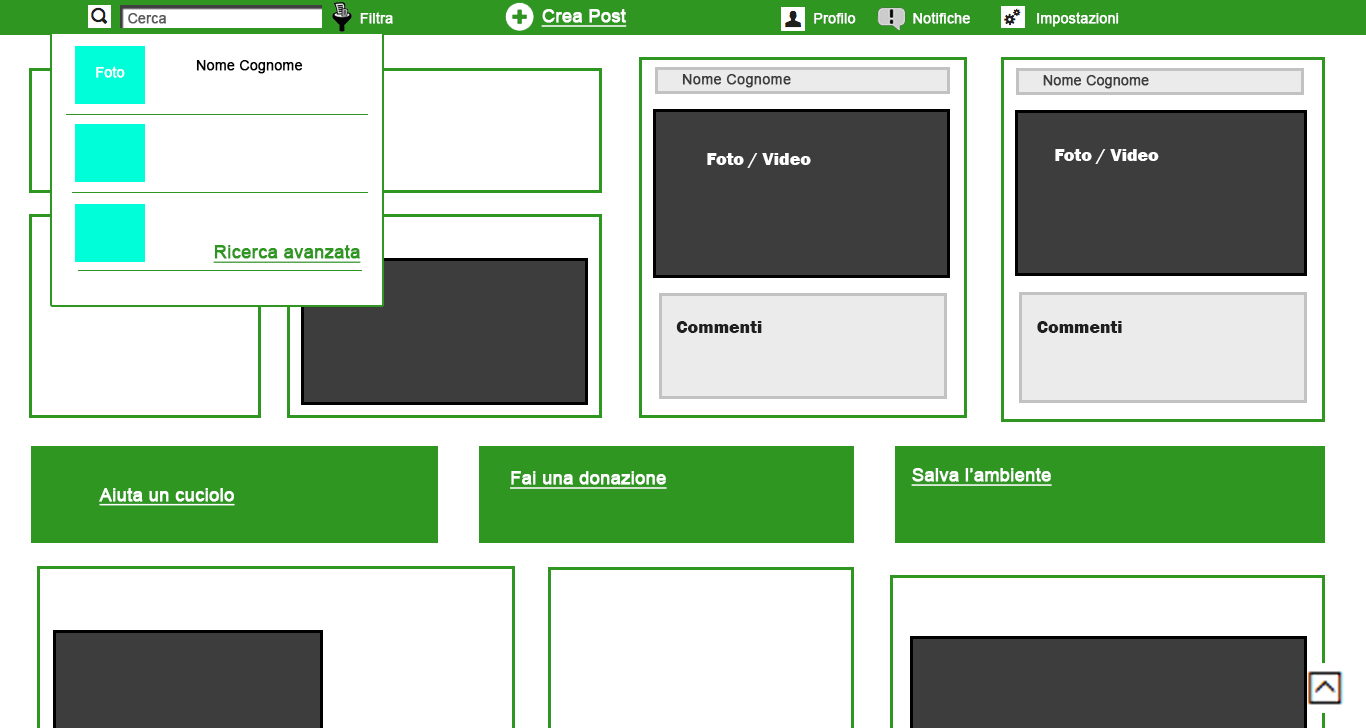
<style>
.page{position:relative;width:1366px;height:728px;background:#ffffff}
.page>*{position:absolute;margin:0}
.t1{font:14px "ArialMT";color:#5b5b5b;font-weight:bold}
.t2{font:14px "ArialMT";color:#ffffff;font-weight:bold}
.t3{font:18px "ArialMT";color:#ffffff;font-weight:bold;text-decoration:underline}
.t4{font:14px "ArialMT";color:#000000;font-weight:bold}
.t5{font:14px "ArialMT";color:#3d3d3d;font-weight:bold}
.t6{font:18px "FranklinGothic-Heavy";color:#ffffff}
.t7{font:18px "ArialMT";color:#2f9721;font-weight:bold;text-decoration:underline}
.t8{font:18px "FranklinGothic-Heavy";color:#1f1f1f}
</style>
<div class="page">
<p class="t1" style="left:128px;top:13px;width:38px;height:11px">Cerca</p>
<p class="t2" style="left:360px;top:12px;width:33px;height:12px">Filtra</p>
<p class="t3" style="left:541px;top:9px;width:86px;height:18px">Crea Post</p>
<p class="t2" style="left:814px;top:13px;width:42px;height:11px">Profilo</p>
<p class="t2" style="left:913px;top:12px;width:57px;height:12px">Notifiche</p>
<p class="t2" style="left:1037px;top:12px;width:82px;height:15px">Impostazioni</p>
<p class="t4" style="left:196px;top:60px;width:107px;height:14px">Nome Cognome</p>
<p class="t2" style="left:96px;top:66px;width:29px;height:12px">Foto</p>
<p class="t5" style="left:682px;top:74px;width:109px;height:14px">Nome Cognome</p>
<p class="t5" style="left:1043px;top:75px;width:106px;height:14px">Nome Cognome</p>
<p class="t6" style="left:1055px;top:149px;width:104px;height:15px">Foto / Video</p>
<p class="t6" style="left:707px;top:153px;width:104px;height:15px">Foto / Video</p>
<p class="t7" style="left:213px;top:245px;width:148px;height:18px">Ricerca avanzata</p>
<p class="t8" style="left:676px;top:321px;width:86px;height:12px">Commenti</p>
<p class="t8" style="left:1037px;top:321px;width:85px;height:12px">Commenti</p>
<p class="t3" style="left:510px;top:471px;width:157px;height:18px">Fai una donazione</p>
<p class="t3" style="left:911px;top:468px;width:141px;height:18px">Salva l’ambiente</p>
<p class="t3" style="left:99px;top:488px;width:136px;height:18px">Aiuta un cuciolo</p>
</div>
